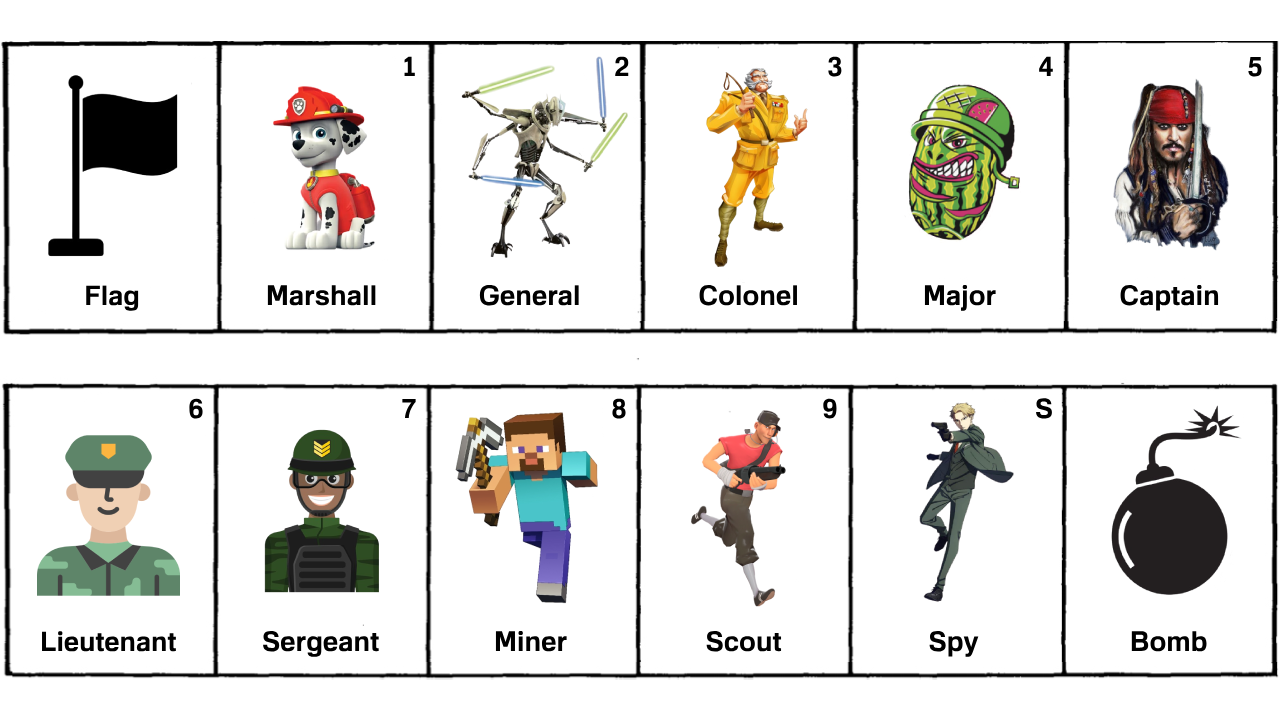
<style>
.page{position:relative;width:1280px;height:720px;background:#ffffff}
.page>*{position:absolute;margin:0}
.t1{font:27px "FamiliarPro-Bold";color:#000000}
.t2{font:27.4px "FamiliarPro-Bold";color:#000000}
</style>
<div class="page">
<p class="t1" style="left:404px;top:56px;width:11px;height:20px">1</p>
<p class="t1" style="left:615px;top:56px;width:14px;height:20px">2</p>
<p class="t1" style="left:828px;top:56px;width:14px;height:21px">3</p>
<p class="t1" style="left:1039px;top:56px;width:14px;height:20px">4</p>
<p class="t1" style="left:1248px;top:57px;width:14px;height:20px">5</p>
<p class="t1" style="left:86px;top:285px;width:53px;height:26px">Flag</p>
<p class="t2" style="left:267px;top:285px;width:109px;height:21px">Marshall</p>
<p class="t2" style="left:479px;top:284px;width:100px;height:22px">General</p>
<p class="t2" style="left:699px;top:284px;width:98px;height:22px">Colonel</p>
<p class="t2" style="left:924px;top:284px;width:72px;height:27px">Major</p>
<p class="t2" style="left:1120px;top:284px;width:99px;height:27px">Captain</p>
<p class="t1" style="left:189px;top:398px;width:14px;height:21px">6</p>
<p class="t1" style="left:402px;top:399px;width:14px;height:19px">7</p>
<p class="t1" style="left:612px;top:398px;width:14px;height:21px">8</p>
<p class="t1" style="left:823px;top:398px;width:14px;height:21px">9</p>
<p class="t1" style="left:1036px;top:398px;width:16px;height:21px">S</p>
<p class="t2" style="left:263px;top:630px;width:116px;height:27px">Sergeant</p>
<p class="t2" style="left:495px;top:630px;width:72px;height:22px">Miner</p>
<p class="t2" style="left:706px;top:630px;width:76px;height:22px">Scout</p>
<p class="t2" style="left:929px;top:630px;width:50px;height:27px">Spy</p>
<p class="t1" style="left:42px;top:631px;width:134px;height:21px">Lieutenant</p>
<p class="t2" style="left:1131px;top:631px;width:76px;height:21px">Bomb</p>
</div>
